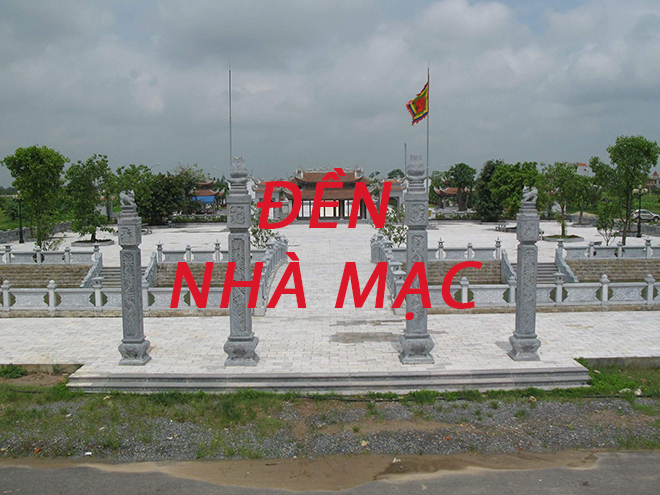
<style>
.page{position:relative;width:660px;height:495px}
.page>*{position:absolute;margin:0}
.t1{font:66.7px/80px "MyriadPro-Regular";letter-spacing:0.06em;color:#d91729;text-transform:uppercase;font-weight:bold;font-style:italic}
</style>
<div class="page">
<p class="t1" style="left:170px;top:168px;width:313px;height:152px;text-align:center">ĐỀN<br>NHÀ MẠC</p>
</div>
